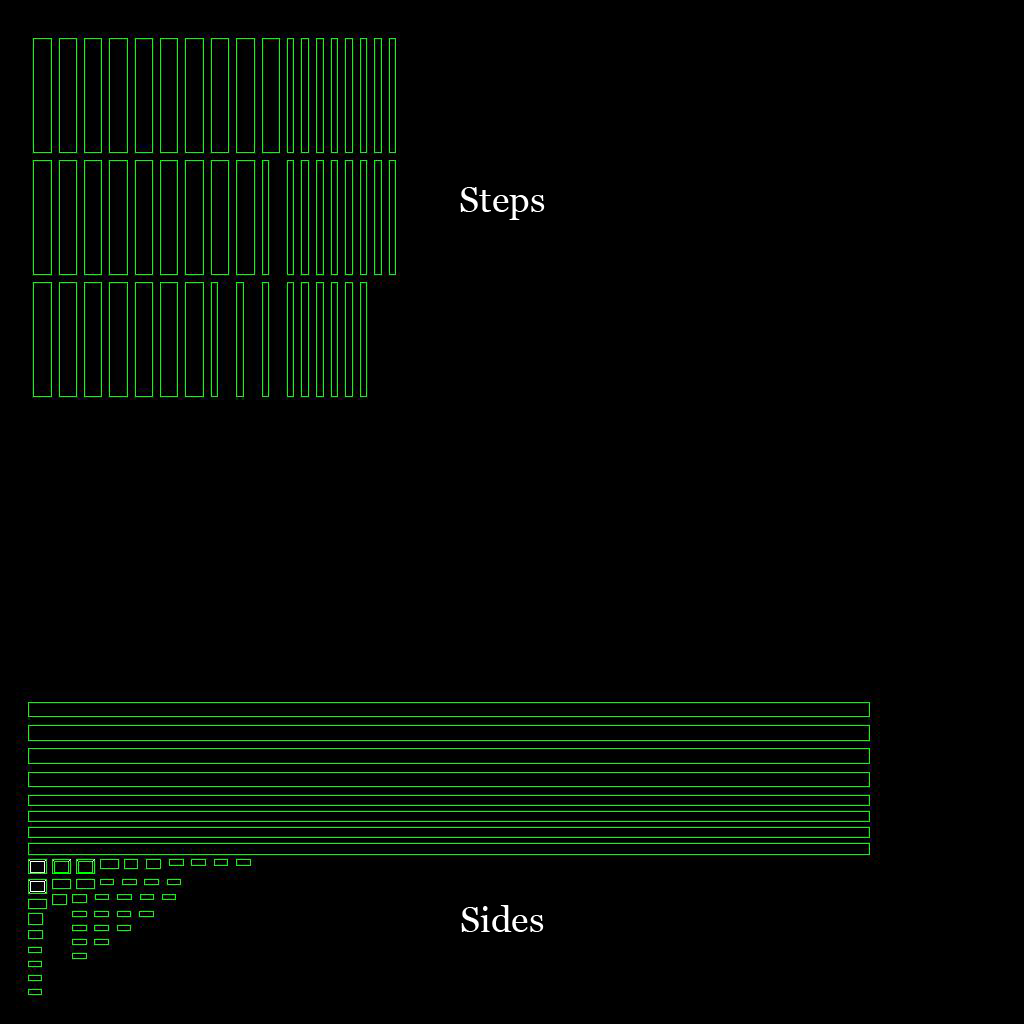
<style>
.page{position:relative;width:1024px;height:1024px;background:#000000}
.page>*{position:absolute;margin:0}
.t1{font:36px "Georgia";color:#ffffff}
</style>
<div class="page">
<p class="t1" style="left:460px;top:187px;width:85px;height:33px">Steps</p>
<p class="t1" style="left:461px;top:905px;width:83px;height:27px">Sides</p>
</div>
